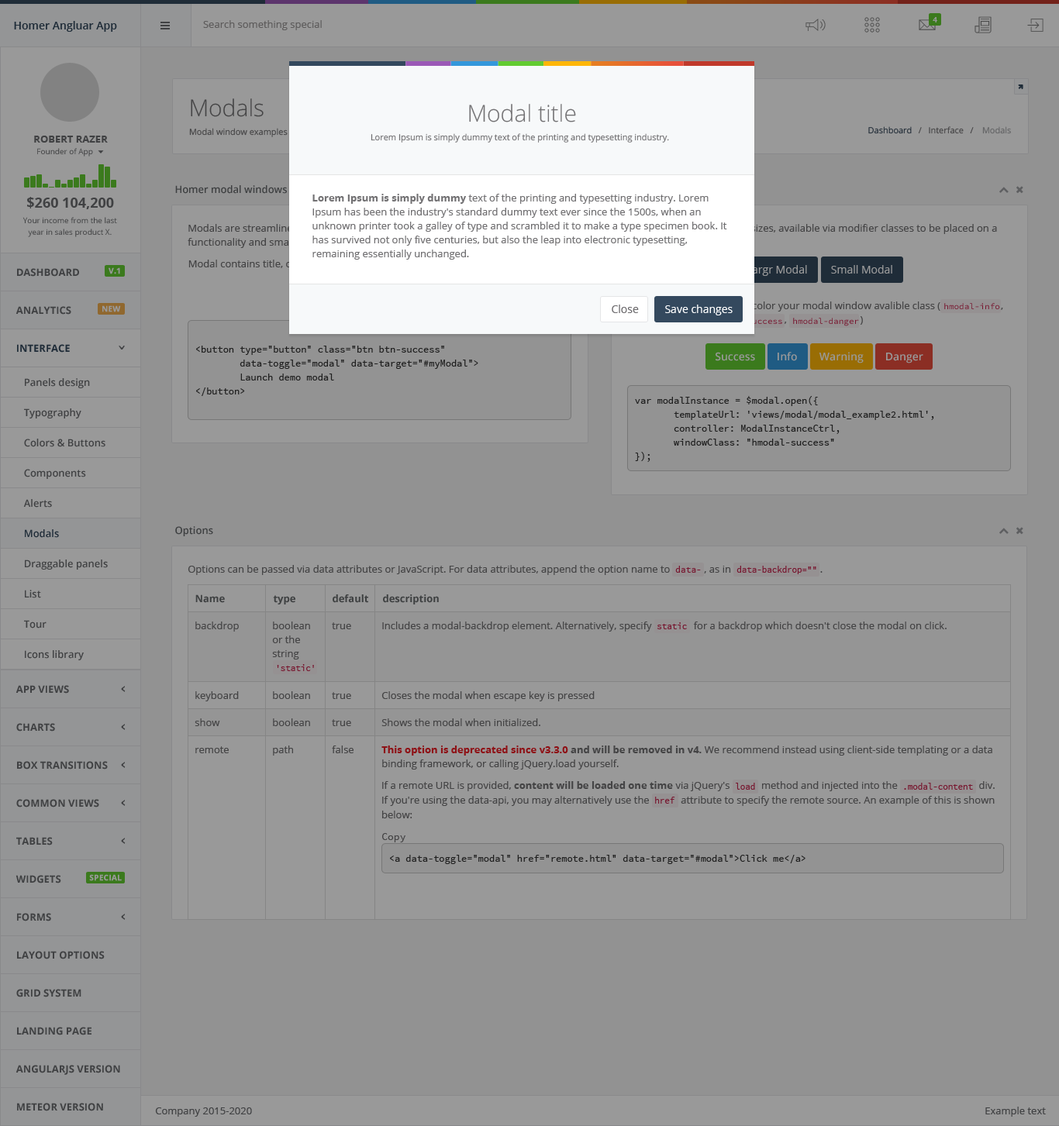
<style>
.page{position:relative;width:1059px;height:1126px;background:#999999}
.page>*{position:absolute;margin:0}
.t1{font:7.8px "OpenSans-Bold";color:#999999}
.t2{font:10.9px "OpenSans-Semibold";color:#1f2c38}
.t3{font:10.1px "OpenSans";color:#5e5c5c}
.t4{font:23.3px "OpenSans-Light";color:#444445}
.t5{font:23.3px "OpenSans-Light";color:#727173}
.t6{font:10.1px "OpenSans-Bold";color:#404143}
.t7{font:8.5px "OpenSans";color:#444445}
.t8{font:8.5px "OpenSans";color:#727173}
.t9{font:8.5px "OpenSans"}
.t10{font:7.8px "OpenSans";color:#404143}
.t11{font:10.1px "OpenSans-Semibold";color:#3e4041}
.t12{font:14px "OpenSans-Bold";color:#404143}
.t13{font:10.1px/14px "OpenSans";color:#727173}
.t14{font:10.1px/14px "OpenSans-Bold";color:#727173}
.t15{font:7.8px/11.6px "OpenSans";color:#404143}
.t16{font:7.8px "OpenSans-Bold";color:#999999;font-weight:bold}
.t17{font:10.9px "OpenSans";color:#999999}
.t18{font:10.9px "OpenSans";color:#6e6c6f}
.t19{font:10.9px "OpenSans";color:#ffffff}
.t20{font:8.5px "SourceCodePro-Regular";color:#77162f}
.t21{font:10.1px "OpenSans-Bold";color:#1f2c38}
.t22{font:10.1px/14px "SourceCodePro-Regular";color:#333333;scale:0.92 1}
.t23{font:10.9px "OpenSans-Semibold";color:#999999}
.t24{font:10.1px "OpenSans-Semibold";color:#404143}
.t25{font:10.1px "OpenSans-Semibold";color:#1f2c38}
.t26{font:10.1px "OpenSans";color:#444445}
.t27{font:9.3px "SourceCodePro-Regular";color:#77162f;scale:0.93 1}
.t28{font:9.3px "SourceCodePro-Regular";color:#77162f;scale:0.9 1}
.t29{font:10.1px "OpenSans-Bold";color:#3e4041}
.t30{font:10.1px/14px "OpenSans";color:#444445}
.t31{font:10.1px/14px "OpenSans"}
.t32{font:10.1px/14px "OpenSans-Bold"}
.t33{font:10.1px/14.7px "OpenSans";color:#444445}
.t34{font:10.1px/14.7px "OpenSans-Bold";color:#444445}
.t35{font:10.1px "SourceCodePro-Regular";color:#444445}
.t36{font:10.1px "SourceCodePro-Regular";color:#333333;scale:0.92 1}
.t37{font:10.1px "OpenSans";color:#404143}
</style>
<div class="page">
<p class="t1" style="left:932px;top:17px;width:5px;height:5px">4</p>
<p class="t2" style="left:14px;top:21px;width:103px;height:11px">Homer Angluar App</p>
<p class="t3" style="left:203px;top:20px;width:119px;height:10px">Search something special</p>
<p class="t4" style="left:191px;top:98px;width:73px;height:19px">Modals</p>
<p class="t5" style="left:469px;top:104px;width:107px;height:18px">Modal title</p>
<p class="t6" style="left:34px;top:136px;width:74px;height:7px">ROBERT RAZER</p>
<p class="t7" style="left:189px;top:128px;width:99px;height:9px">Modal window examples</p>
<p class="t8" style="left:370px;top:133px;width:299px;height:10px">Lorem Ipsum is simply dummy text of the printing and typesetting industry.</p>
<p class="t9" style="left:868px;top:126px;width:143px;height:8px">Dashboard   /   Interface   /    Modals</p>
<p class="t10" style="left:37px;top:148px;width:56px;height:9px">Founder of App</p>
<p class="t11" style="left:175px;top:185px;width:112px;height:9px">Homer modal windows</p>
<p class="t12" style="left:27px;top:197px;width:87px;height:12px">$260 104,200</p>
<p class="t13" style="left:312px;top:194px;width:415px;height:66px"><span class="t14">Lorem Ipsum is simply dummy </span>text of the printing and typesetting industry. Lorem Ipsum has been the industry's standard dummy text ever since the 1500s, when an unknown printer took a galley of type and scrambled it to make a type specimen book. It has survived not only five centuries, but also the leap into electronic typesetting, remaining essentially unchanged.</p>
<p class="t15" style="left:22px;top:217px;width:95px;height:20px;text-align:center">Your income from the last<br>year in sales product X.</p>
<p class="t6" style="left:17px;top:268px;width:62px;height:9px">DASHBOARD</p>
<p class="t16" style="left:109px;top:267px;width:11px;height:7px">V.1</p>
<p class="t17" style="left:747px;top:265px;width:60px;height:11px">Largr Modal</p>
<p class="t17" style="left:831px;top:265px;width:61px;height:9px">Small Modal</p>
<p class="t16" style="left:102px;top:305px;width:19px;height:7px">NEW</p>
<p class="t18" style="left:612px;top:305px;width:27px;height:8px">Close</p>
<p class="t19" style="left:665px;top:305px;width:67px;height:10px">Save changes</p>
<p class="t20" style="left:944px;top:303px;width:56px;height:6px">hmodal-info</p>
<p class="t6" style="left:16px;top:306px;width:55px;height:9px">ANALYTICS</p>
<p class="t20" style="left:793px;top:318px;width:66px;height:8px">hmodal-danger</p>
<p class="t21" style="left:17px;top:344px;width:53px;height:9px">INTERFACE</p>
<p class="t22" style="left:196px;top:346px;width:282px;height:50px">&lt;button type="button" class="btn btn-success"<br>        data-toggle="modal" data-target="#myModal"&gt;<br>        Launch demo modal<br>&lt;/button&gt;</p>
<p class="t23" style="left:715px;top:352px;width:40px;height:9px">Success</p>
<p class="t23" style="left:777px;top:352px;width:20px;height:9px">Info</p>
<p class="t23" style="left:819px;top:352px;width:44px;height:12px">Warning</p>
<p class="t23" style="left:886px;top:353px;width:37px;height:11px">Danger</p>
<p class="t24" style="left:25px;top:378px;width:65px;height:10px">Panels design</p>
<p class="t22" style="left:635px;top:396px;width:299px;height:66px">var modalInstance = $modal.open({<br>       templateUrl: 'views/modal/modal_example2.html',<br>       controller: ModalInstanceCtrl,<br>       windowClass: "hmodal-success"<br>});</p>
<p class="t24" style="left:24px;top:408px;width:57px;height:11px">Typography</p>
<p class="t24" style="left:24px;top:439px;width:81px;height:8px">Colors &amp; Buttons</p>
<p class="t24" style="left:24px;top:469px;width:62px;height:10px">Components</p>
<p class="t24" style="left:23px;top:499px;width:29px;height:9px">Alerts</p>
<p class="t25" style="left:25px;top:529px;width:34px;height:9px">Modals</p>
<p class="t11" style="left:175px;top:526px;width:38px;height:10px">Options</p>
<p class="t24" style="left:25px;top:560px;width:83px;height:10px">Draggable panels</p>
<p class="t26" style="left:188px;top:565px;width:634px;height:10px">Options can be passed via data attributes or JavaScript. For data attributes, append the option name to             , as in                                  .</p>
<p class="t27" style="left:675px;top:566px;width:26px;height:7px">data-</p>
<p class="t28" style="left:736px;top:566px;width:80px;height:8px">data-backdrop=""</p>
<p class="t24" style="left:25px;top:590px;width:16px;height:8px">List</p>
<p class="t29" style="left:195px;top:595px;width:30px;height:8px">Name</p>
<p class="t29" style="left:273px;top:595px;width:22px;height:10px">type</p>
<p class="t29" style="left:333px;top:595px;width:35px;height:8px">default</p>
<p class="t29" style="left:383px;top:595px;width:56px;height:10px">description</p>
<p class="t24" style="left:24px;top:620px;width:23px;height:9px">Tour</p>
<p class="t26" style="left:195px;top:622px;width:44px;height:10px">backdrop</p>
<p class="t30" style="left:272px;top:622px;width:38px;height:38px">boolean or the string</p>
<p class="t26" style="left:332px;top:622px;width:19px;height:7px">true</p>
<p class="t26" style="left:382px;top:622px;width:564px;height:10px">Includes a modal-backdrop element. Alternatively, specify                for a backdrop which doesn't close the modal on click.</p>
<p class="t28" style="left:657px;top:622px;width:30px;height:7px">static</p>
<p class="t24" style="left:25px;top:650px;width:59px;height:10px">Icons library</p>
<p class="t28" style="left:277px;top:664px;width:37px;height:7px">'static'</p>
<p class="t6" style="left:16px;top:685px;width:53px;height:9px">APP VIEWS</p>
<p class="t26" style="left:195px;top:691px;width:44px;height:10px">keyboard</p>
<p class="t26" style="left:273px;top:691px;width:37px;height:8px">boolean</p>
<p class="t26" style="left:332px;top:692px;width:19px;height:7px">true</p>
<p class="t26" style="left:381px;top:691px;width:214px;height:10px">Closes the modal when escape key is pressed</p>
<p class="t6" style="left:16px;top:723px;width:39px;height:9px">CHARTS</p>
<p class="t26" style="left:195px;top:719px;width:25px;height:7px">show</p>
<p class="t26" style="left:273px;top:719px;width:37px;height:7px">boolean</p>
<p class="t26" style="left:332px;top:719px;width:19px;height:7px">true</p>
<p class="t26" style="left:381px;top:719px;width:159px;height:7px">Shows the modal when initialized.</p>
<p class="t26" style="left:195px;top:746px;width:34px;height:7px">remote</p>
<p class="t26" style="left:273px;top:746px;width:20px;height:10px">path</p>
<p class="t26" style="left:332px;top:746px;width:21px;height:7px">false</p>
<p class="t31" style="left:381px;top:746px;width:611px;height:24px"><span class="t32">This option is deprecated since v3.3.0</span><span class="t32"> and will be removed in v4.</span> We recommend instead using client-side templating or a data binding framework, or calling jQuery.load yourself.</p>
<p class="t6" style="left:17px;top:761px;width:91px;height:9px">BOX TRANSITIONS</p>
<p class="t33" style="left:382px;top:781px;width:612px;height:38px">If a remote URL is provided, <span class="t34">content will be loaded one time</span> via jQuery's            method and injected into the                               div. If you're using the data-api, you may alternatively use the            attribute to specify the remote source. An example of this is shown below:</p>
<p class="t28" style="left:736px;top:783px;width:19px;height:7px">load</p>
<p class="t28" style="left:904px;top:783px;width:69px;height:7px">.modal-content</p>
<p class="t28" style="left:655px;top:797px;width:20px;height:7px">href</p>
<p class="t6" style="left:16px;top:799px;width:83px;height:9px">COMMON VIEWS</p>
<p class="t35" style="left:382px;top:833px;width:23px;height:10px">Copy</p>
<p class="t6" style="left:16px;top:837px;width:37px;height:9px">TABLES</p>
<p class="t36" style="left:390px;top:855px;width:415px;height:9px">&lt;a data-toggle="modal" href="remote.html" data-target="#modal"&gt;Click me&lt;/a&gt;</p>
<p class="t6" style="left:16px;top:875px;width:45px;height:9px">WIDGETS</p>
<p class="t16" style="left:89px;top:874px;width:33px;height:7px">SPECIAL</p>
<p class="t6" style="left:17px;top:913px;width:34px;height:9px">FORMS</p>
<p class="t6" style="left:17px;top:951px;width:88px;height:9px">LAYOUT OPTIONS</p>
<p class="t6" style="left:16px;top:989px;width:65px;height:9px">GRID SYSTEM</p>
<p class="t6" style="left:17px;top:1027px;width:74px;height:9px">LANDING PAGE</p>
<p class="t6" style="left:16px;top:1065px;width:104px;height:10px">ANGULARJS VERSION</p>
<p class="t6" style="left:17px;top:1103px;width:86px;height:8px">METEOR VERSION</p>
<p class="t37" style="left:155px;top:1108px;width:97px;height:9px">Company 2015-2020</p>
<p class="t37" style="left:985px;top:1107px;width:61px;height:10px">Example text</p>
</div>
